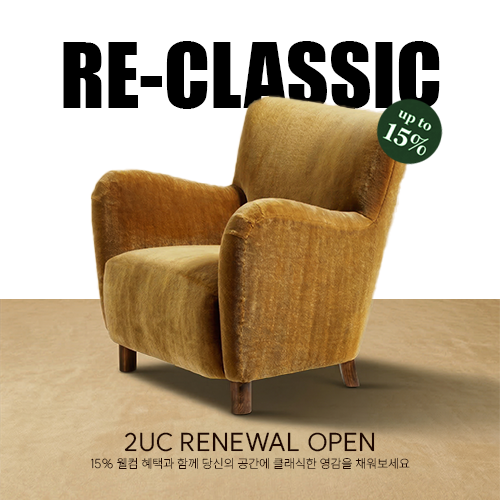
<style>
.page{position:relative;width:500px;height:500px;background:#ffffff}
.page>*{position:absolute;margin:0}
.t1{font:83.3px "Impact";color:#000000}
.t2{font:25px "SUIT-Medium";color:#1d0702}
.t3{font:12.5px "SUIT-Thin";color:#1d0702}
</style>
<div class="page">
<p class="t1" style="left:63px;top:41px;width:377px;height:68px">RE-CLASSIC</p>
<p class="t2" style="left:124px;top:432px;width:251px;height:20px">2UC RENEWAL OPEN</p>
<p class="t3" style="left:91px;top:457px;width:319px;height:12px">15% 웰컴 혜택과 함께 당신의 공간에 클래식한 영감을 채워보세요</p>
</div>
